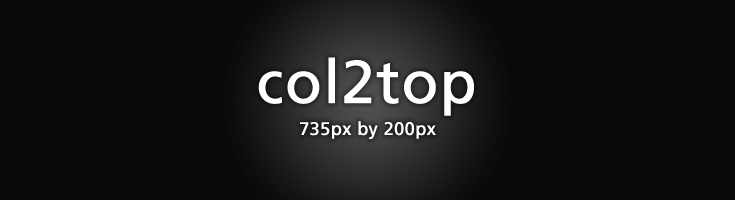
<style>
.page{position:relative;width:735px;height:200px;background:#080909}
.page>*{position:absolute;margin:0}
.t1{font:60px "FrutigerLT-Roman";color:#ffffff;font-weight:bold}
.t2{font:18px "FrutigerLT-Roman";color:#ffffff;font-weight:bold}
</style>
<div class="page">
<p class="t1" style="left:258px;top:57px;width:216px;height:59px">col2top</p>
<p class="t2" style="left:300px;top:121px;width:136px;height:18px">735px by 200px</p>
</div>
